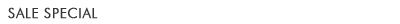
<style>
.page{position:relative;width:400px;height:24px;background:#ffffff}
.page>*{position:absolute;margin:0}
.t1{font:14px "FuturaBT-Light";letter-spacing:0.025em;color:#363636;text-transform:uppercase;font-weight:bold}
</style>
<div class="page">
<p class="t1" style="left:8px;top:7px;width:90px;height:12px">sale special</p>
</div>
